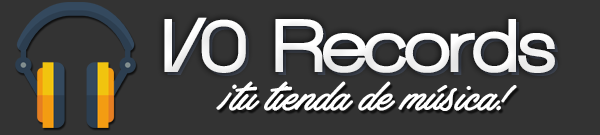
<style>
.page{position:relative;width:600px;height:135px;background:#333333}
.page>*{position:absolute;margin:0}
.t1{font:78px "WalkwayBlack";color:#ffffff}
.t2{font:78px "WalkwayBlack"}
.t3{font:48px "ArtelyInksPERSONALUSE";color:#ffffff}
</style>
<div class="page">
<p class="t1" style="left:164px;top:17px;width:391px;height:56px">I/0 Records</p>
<p class="t2" style="left:167px;top:20px;width:391px;height:56px">I/0 Records</p>
<p class="t3" style="left:216px;top:81px;width:301px;height:30px">¡tu tienda de música!</p>
</div>
